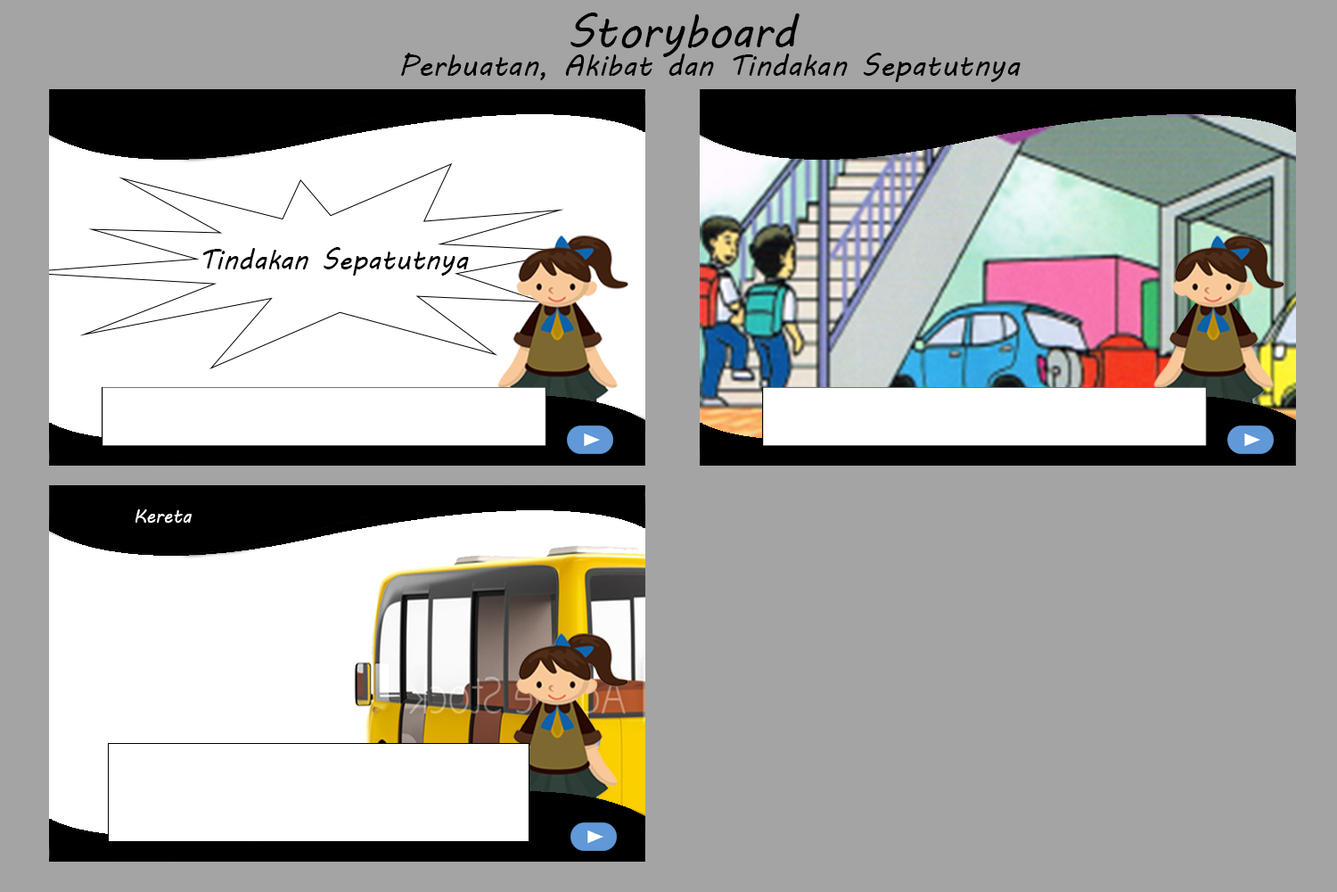
<style>
.page{position:relative;width:1337px;height:892px;background:#a4a4a4}
.page>*{position:absolute;margin:0}
.t1{font:44.6px "MVBoli";color:#010101}
.t2{font:29.7px "MVBoli";color:#000000}
.t3{font:27.5px "MVBoli";color:#000000}
.t4{font:18.6px "MVBoli";color:#ffffff}
</style>
<div class="page">
<p class="t1" style="left:571px;top:12px;width:229px;height:45px">Storyboard</p>
<p class="t2" style="left:401px;top:53px;width:620px;height:29px">Perbuatan, Akibat dan Tindakan Sepatutnya</p>
<p class="t3" style="left:202px;top:247px;width:267px;height:29px">Tindakan Sepatutnya</p>
<p class="t4" style="left:136px;top:509px;width:56px;height:13px">Kereta</p>
</div>
